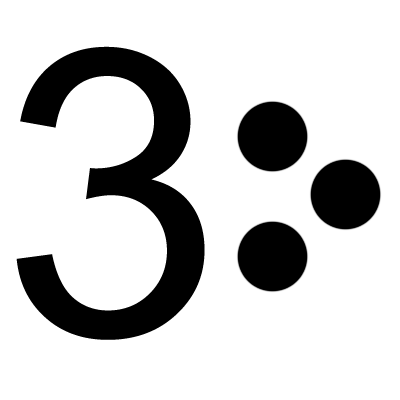
<style>
.page{position:relative;width:400px;height:400px;background:#ffffff}
.page>*{position:absolute;margin:0}
.t1{font:400.2px "ArialMT";color:#000000}
</style>
<div class="page">
<p class="t1" style="left:16px;top:46px;width:189px;height:294px">3</p>
</div>
